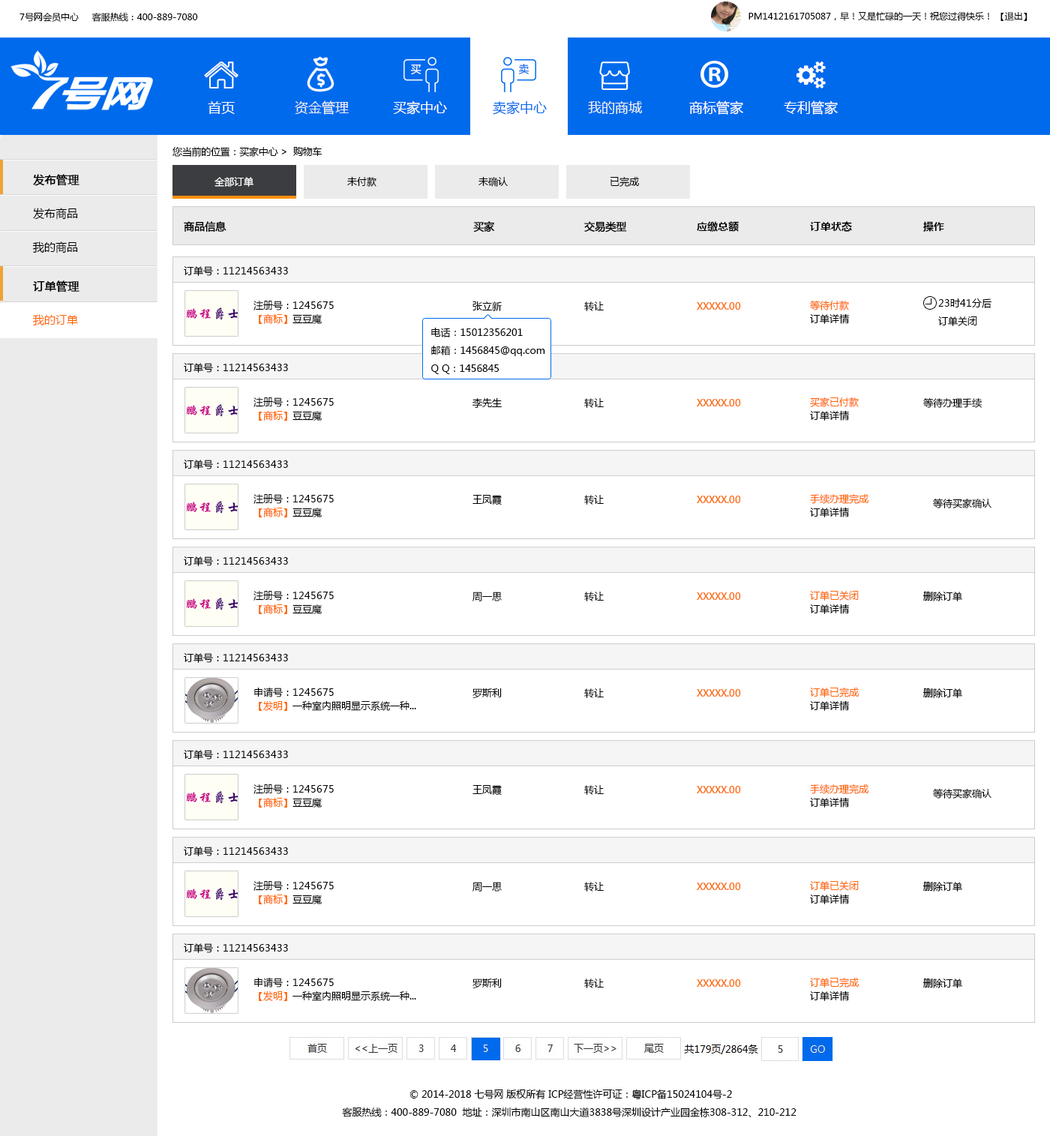
<style>
.page{position:relative;width:1050px;height:1136px;background:#ffffff}
.page>*{position:absolute;margin:0}
.t1{font:9px "MicrosoftYaHei";color:#000000}
.t2{font:10.5px "MicrosoftYaHei";color:#ffffff}
.t3{font:10.5px "MicrosoftYaHei";color:#006aed}
.t4{font:13.5px "MicrosoftYaHei";color:#ffffff}
.t5{font:13.5px "MicrosoftYaHei";color:#ecf0f1}
.t6{font:13.5px "MicrosoftYaHei";color:#006aed}
.t7{font:9.7px "MicrosoftYaHei";letter-spacing:-0.02em;color:#000000}
.t8{font:11.2px/33.7px "MicrosoftYaHei";color:#000000}
.t9{font:11.2px/33.7px "MicrosoftYaHei";color:#000000;font-weight:bold}
.t10{font:9.7px "MicrosoftYaHei";color:#ffffff}
.t11{font:9.7px "MicrosoftYaHei";color:#000000}
.t12{font:10.5px "MicrosoftYaHei";color:#000000;font-weight:bold}
.t13{font:10.5px "MicrosoftYaHei-Bold";color:#000000}
.t14{font:11.2px/33.7px "MicrosoftYaHei";color:#ff6600}
.t15{font:9.7px/13.5px "MicrosoftYaHei";color:#000000}
.t16{font:9.7px/13.5px "MicrosoftYaHei";color:#ff6600}
.t17{font:9.7px "MicrosoftYaHei";color:#ff6600}
.t18{font:9.7px/18px "MicrosoftYaHei";color:#000000}
</style>
<div class="page">
<p class="t1" style="left:19px;top:12px;width:179px;height:10px">7号网会员中心     客服热线：400-889-7080</p>
<p class="t1" style="left:748px;top:12px;width:279px;height:9px">PM1412161705087，早！又是忙碌的一天！祝您过得快乐！ 【退出】</p>
<p class="t2" style="left:410px;top:64px;width:11px;height:11px">买</p>
<p class="t3" style="left:518px;top:64px;width:11px;height:10px">卖</p>
<p class="t4" style="left:208px;top:101px;width:27px;height:13px">首页</p>
<p class="t5" style="left:295px;top:100px;width:54px;height:15px">资金管理</p>
<p class="t4" style="left:393px;top:100px;width:54px;height:15px">买家中心</p>
<p class="t6" style="left:493px;top:100px;width:54px;height:15px">卖家中心</p>
<p class="t5" style="left:588px;top:101px;width:54px;height:13px">我的商城</p>
<p class="t4" style="left:689px;top:100px;width:54px;height:15px">商标管家</p>
<p class="t4" style="left:784px;top:100px;width:54px;height:15px">专利管家</p>
<p class="t7" style="left:172px;top:146px;width:150px;height:11px">您当前的位置：买家中心 &gt;  购物车</p>
<p class="t8" style="left:32px;top:174px;width:47px;height:79px"><span class="t9">发布管理<br></span>发布商品<br>我的商品</p>
<p class="t10" style="left:214px;top:177px;width:39px;height:10px">全部订单</p>
<p class="t11" style="left:347px;top:177px;width:29px;height:10px">未付款</p>
<p class="t11" style="left:478px;top:177px;width:30px;height:10px">未确认</p>
<p class="t11" style="left:610px;top:177px;width:29px;height:10px">已完成</p>
<p class="t12" style="left:184px;top:221px;width:42px;height:11px">商品信息</p>
<p class="t12" style="left:473px;top:221px;width:22px;height:11px">买家</p>
<p class="t12" style="left:584px;top:221px;width:43px;height:11px">交易类型</p>
<p class="t13" style="left:697px;top:221px;width:42px;height:11px">应缴总额</p>
<p class="t13" style="left:810px;top:221px;width:42px;height:11px">订单状态</p>
<p class="t13" style="left:923px;top:221px;width:21px;height:11px">操作</p>
<p class="t11" style="left:184px;top:266px;width:104px;height:10px">订单号：11214563433</p>
<p class="t9" style="left:32px;top:280px;width:47px;height:46px">订单管理<br><span class="t14">我的订单</span></p>
<p class="t15" style="left:253px;top:301px;width:81px;height:23px">注册号：1245675<br><span class="t16">【商标】</span>豆豆魔</p>
<p class="t11" style="left:472px;top:301px;width:30px;height:10px">张立新</p>
<p class="t11" style="left:584px;top:301px;width:20px;height:10px">转让</p>
<p class="t17" style="left:697px;top:302px;width:44px;height:8px">XXXXX.00</p>
<p class="t16" style="left:810px;top:300px;width:40px;height:24px">等待付款 <br><span class="t15">订单详情</span></p>
<p class="t18" style="left:938px;top:298px;width:53px;height:28px">23时41分后<br>订单关闭</p>
<p class="t18" style="left:431px;top:328px;width:114px;height:46px">电话：15012356201<br>邮箱：1456845@qq.com<br>Q Q：1456845</p>
<p class="t11" style="left:184px;top:363px;width:104px;height:10px">订单号：11214563433</p>
<p class="t15" style="left:253px;top:397px;width:81px;height:24px">注册号：1245675<br><span class="t16">【商标】</span>豆豆魔</p>
<p class="t11" style="left:472px;top:398px;width:30px;height:10px">李先生</p>
<p class="t11" style="left:584px;top:398px;width:20px;height:10px">转让</p>
<p class="t17" style="left:697px;top:399px;width:44px;height:7px">XXXXX.00</p>
<p class="t16" style="left:810px;top:397px;width:49px;height:24px">买家已付款 <br><span class="t15">订单详情</span></p>
<p class="t11" style="left:923px;top:397px;width:59px;height:11px">等待办理手续</p>
<p class="t11" style="left:184px;top:460px;width:104px;height:9px">订单号：11214563433</p>
<p class="t15" style="left:253px;top:494px;width:81px;height:23px">注册号：1245675<br><span class="t16">【商标】</span>豆豆魔</p>
<p class="t11" style="left:472px;top:495px;width:30px;height:10px">王凤霞</p>
<p class="t11" style="left:584px;top:495px;width:20px;height:10px">转让</p>
<p class="t17" style="left:697px;top:496px;width:44px;height:7px">XXXXX.00</p>
<p class="t16" style="left:810px;top:494px;width:58px;height:23px">手续办理完成<br><span class="t15">订单详情</span></p>
<p class="t11" style="left:933px;top:498px;width:58px;height:10px">等待买家确认</p>
<p class="t11" style="left:184px;top:556px;width:104px;height:10px">订单号：11214563433</p>
<p class="t15" style="left:253px;top:591px;width:81px;height:23px">注册号：1245675<br><span class="t16">【商标】</span>豆豆魔</p>
<p class="t11" style="left:472px;top:592px;width:30px;height:9px">周一思</p>
<p class="t11" style="left:584px;top:592px;width:20px;height:9px">转让</p>
<p class="t17" style="left:697px;top:592px;width:44px;height:8px">XXXXX.00</p>
<p class="t16" style="left:810px;top:591px;width:49px;height:23px">订单已关闭 <br><span class="t15">订单详情</span></p>
<p class="t11" style="left:923px;top:592px;width:39px;height:9px">删除订单</p>
<p class="t11" style="left:184px;top:653px;width:104px;height:10px">订单号：11214563433</p>
<p class="t15" style="left:254px;top:687px;width:162px;height:24px">申请号：1245675<br><span class="t16">【发明】</span>一种室内照明显示系统一种...</p>
<p class="t11" style="left:472px;top:688px;width:30px;height:11px">罗斯利</p>
<p class="t11" style="left:584px;top:688px;width:20px;height:10px">转让</p>
<p class="t17" style="left:697px;top:689px;width:44px;height:8px">XXXXX.00</p>
<p class="t16" style="left:810px;top:688px;width:49px;height:23px">订单已完成<br><span class="t15">订单详情</span></p>
<p class="t11" style="left:923px;top:688px;width:39px;height:10px">删除订单</p>
<p class="t11" style="left:184px;top:750px;width:104px;height:10px">订单号：11214563433</p>
<p class="t15" style="left:253px;top:784px;width:81px;height:24px">注册号：1245675<br><span class="t16">【商标】</span>豆豆魔</p>
<p class="t11" style="left:472px;top:785px;width:30px;height:11px">王凤霞</p>
<p class="t11" style="left:584px;top:785px;width:20px;height:10px">转让</p>
<p class="t17" style="left:697px;top:786px;width:44px;height:7px">XXXXX.00</p>
<p class="t16" style="left:810px;top:784px;width:58px;height:24px">手续办理完成<br><span class="t15">订单详情</span></p>
<p class="t11" style="left:933px;top:788px;width:58px;height:11px">等待买家确认</p>
<p class="t11" style="left:184px;top:847px;width:104px;height:9px">订单号：11214563433</p>
<p class="t15" style="left:253px;top:881px;width:81px;height:23px">注册号：1245675<br><span class="t16">【商标】</span>豆豆魔</p>
<p class="t11" style="left:472px;top:882px;width:30px;height:10px">周一思</p>
<p class="t11" style="left:584px;top:882px;width:20px;height:10px">转让</p>
<p class="t16" style="left:810px;top:881px;width:49px;height:23px">订单已关闭 <br><span class="t15">订单详情</span></p>
<p class="t11" style="left:923px;top:882px;width:39px;height:10px">删除订单</p>
<p class="t17" style="left:697px;top:883px;width:44px;height:7px">XXXXX.00</p>
<p class="t11" style="left:184px;top:943px;width:104px;height:10px">订单号：11214563433</p>
<p class="t15" style="left:254px;top:977px;width:162px;height:24px">申请号：1245675<br><span class="t16">【发明】</span>一种室内照明显示系统一种...</p>
<p class="t16" style="left:810px;top:978px;width:49px;height:23px">订单已完成<br><span class="t15">订单详情</span></p>
<p class="t11" style="left:472px;top:978px;width:30px;height:11px">罗斯利</p>
<p class="t11" style="left:584px;top:978px;width:20px;height:10px">转让</p>
<p class="t17" style="left:697px;top:979px;width:44px;height:8px">XXXXX.00</p>
<p class="t11" style="left:923px;top:978px;width:39px;height:10px">删除订单</p>
<p class="t18" style="left:342px;top:1089px;width:454px;height:28px;text-align:center">© 2014-2018 七号网 版权所有 ICP经营性许可证：粤ICP备15024104号-2<br>客服热线：400-889-7080  地址：深圳市南山区南山大道3838号深圳设计产业园金栋308-312、210-212</p>
</div>
